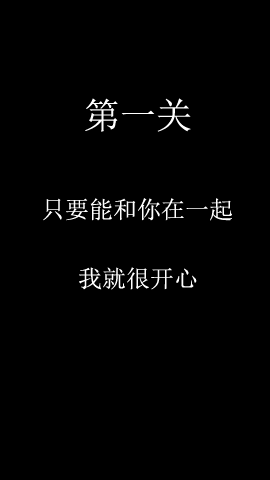
<style>
.page{position:relative;width:270px;height:480px;background:#000000}
.page>*{position:absolute;margin:0}
.t1{font:36px "SimSun";color:#ffffff}
.t2{font:24px "SimSun";color:#ffffff}
</style>
<div class="page">
<p class="t1" style="left:85px;top:98px;width:106px;height:34px">第一关</p>
<p class="t2" style="left:43px;top:198px;width:189px;height:23px">只要能和你在一起</p>
<p class="t2" style="left:79px;top:267px;width:118px;height:23px">我就很开心</p>
</div>
